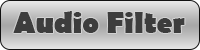
<style>
.page{position:relative;width:200px;height:50px}
.page>*{position:absolute;margin:0}
.t1{font:30px "BerlinSansFB-Bold";color:#3d3d3d}
</style>
<div class="page">
<p class="t1" style="left:13px;top:11px;width:172px;height:22px">Audio Filter</p>
</div>
